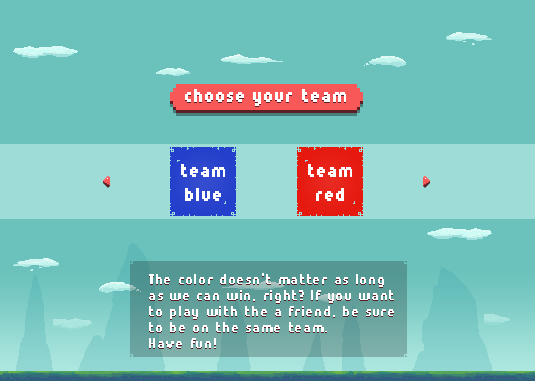
<style>
.page{position:relative;width:535px;height:381px;background:#6bc2bc}
.page>*{position:absolute;margin:0}
.t1{font:18px "Munro";letter-spacing:0.05em;color:#ffffff;font-weight:bold}
.t2{font:18px/24px "Munro";letter-spacing:0.05em;color:#ffffff;font-weight:bold}
.t3{font:14px/16px "Munro";letter-spacing:0.05em;color:#ffffff;font-weight:bold}
</style>
<div class="page">
<p class="t1" style="left:185px;top:89px;width:161px;height:17px">choose your team</p>
<p class="t1" style="left:185px;top:90px;width:161px;height:17px">choose your team</p>
<p class="t2" style="left:181px;top:164px;width:44px;height:37px;text-align:center">team<br>blue</p>
<p class="t2" style="left:308px;top:164px;width:44px;height:37px;text-align:center">team<br>red</p>
<p class="t3" style="left:149px;top:274px;width:245px;height:75px">The color doesn’t matter as long <br>as we can win, right? If you want<br>to play with the a friend, be sure<br>to be on the same team. <br>Have fun!</p>
<p class="t3" style="left:149px;top:273px;width:245px;height:75px">The color doesn’t matter as long <br>as we can win, right? If you want<br>to play with the a friend, be sure<br>to be on the same team. <br>Have fun!</p>
</div>
